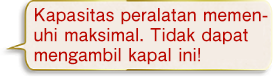
<style>
.page{position:relative;width:274px;height:78px;background:#f4ece4}
.page>*{position:absolute;margin:0}
.t1{font:18px/20px "FutoGoB101Pr5-Bold";color:#bd0800}
</style>
<div class="page">
<p class="t1" style="left:34px;top:8px;width:234px;height:57px">Kapasitas peralatan memen-<br>uhi maksimal. Tidak dapat<br>mengambil kapal ini!</p>
</div>
